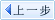
<style>
.page{position:relative;width:55px;height:20px}
.page>*{position:absolute;margin:0}
.t1{font:11px "STSong";letter-spacing:0.2em;color:#122538}
</style>
<div class="page">
<p class="t1" style="left:13px;top:5px;width:38px;height:11px">上一步</p>
</div>
